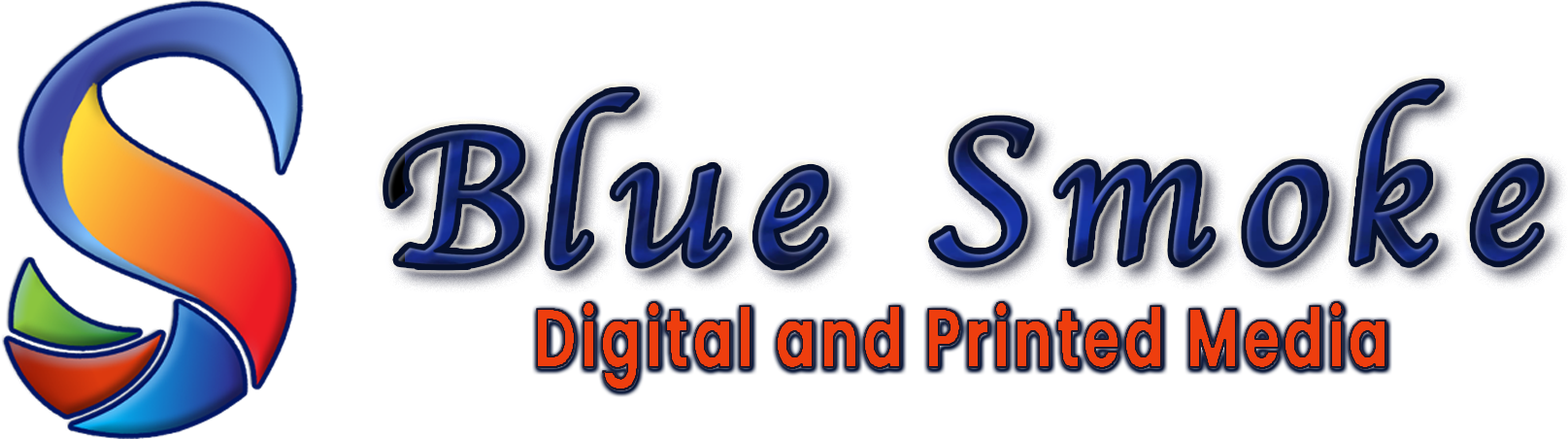
<style>
.page{position:relative;width:1568px;height:439px;background:#ffffff}
.page>*{position:absolute;margin:0}
.t1{font:81.6px "Poppins-SemiBold";letter-spacing:0.05em;color:#ee3e0e;font-weight:bold;scale:0.71 1}
</style>
<div class="page">
<p class="t1" style="left:537px;top:302px;width:848px;height:87px">Digital and Printed Media</p>
</div>
